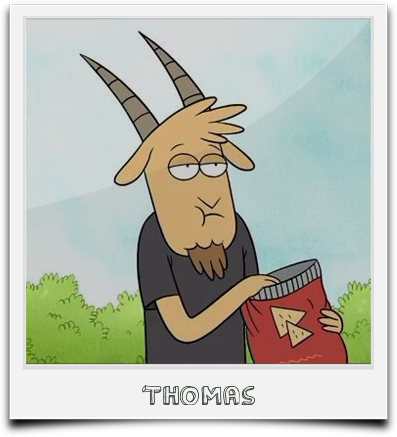
<style>
.page{position:relative;width:397px;height:437px}
.page>*{position:absolute;margin:0}
.t1{font:27.4px "TheRainmaker";color:#475149}
</style>
<div class="page">
<p class="t1" style="left:142px;top:385px;width:113px;height:20px">Thomas</p>
</div>
